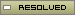
<style>
.page{position:relative;width:75px;height:15px}
.page>*{position:absolute;margin:0}
.t1{font:8px "BitDustTwo";color:#000000}
</style>
<div class="page">
<p class="t1" style="left:19px;top:5px;width:47px;height:5px">RESOLVED</p>
</div>
